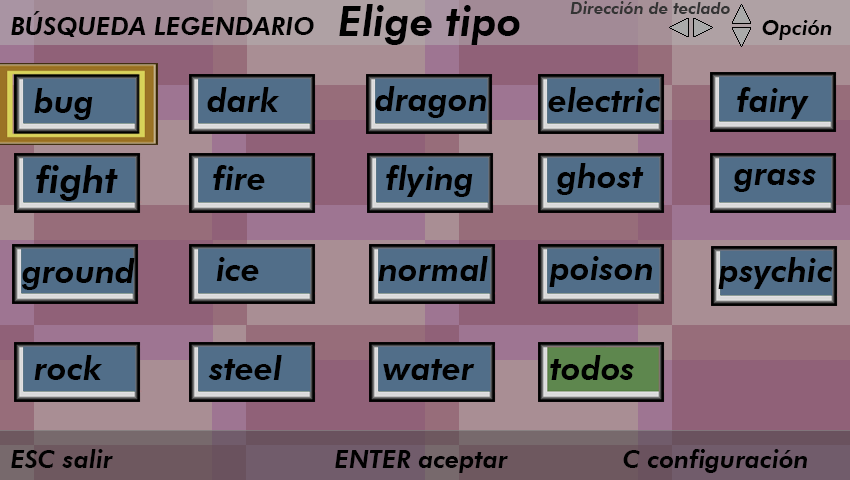
<style>
.page{position:relative;width:850px;height:480px}
.page>*{position:absolute;margin:0}
.t1{font:41.7px "FuturaBT-HeavyItalic";color:#000000}
.t2{font:16.7px "FuturaBT-HeavyItalic";color:#343434}
.t3{font:25px "FuturaBT-HeavyItalic";color:#000000}
.t4{font:20.8px "FuturaBT-HeavyItalic";color:#000000}
.t5{font:33.3px "FuturaBT-HeavyItalic";color:#000000}
.t6{font:37.5px "FuturaBT-HeavyItalic";color:#000000}
</style>
<div class="page">
<p class="t1" style="left:339px;top:4px;width:181px;height:41px">Elige tipo</p>
<p class="t2" style="left:570px;top:1px;width:160px;height:13px">Dirección de teclado</p>
<p class="t3" style="left:11px;top:11px;width:303px;height:26px">BÚSQUEDA LEGENDARIO</p>
<p class="t4" style="left:762px;top:20px;width:70px;height:20px">Opción</p>
<p class="t5" style="left:34px;top:88px;width:59px;height:32px">bug</p>
<p class="t5" style="left:207px;top:87px;width:73px;height:25px">dark</p>
<p class="t5" style="left:375px;top:86px;width:111px;height:32px">dragon</p>
<p class="t5" style="left:548px;top:87px;width:113px;height:25px">electric</p>
<p class="t5" style="left:737px;top:87px;width:72px;height:32px">fairy</p>
<p class="t6" style="left:36px;top:165px;width:82px;height:36px">fight</p>
<p class="t5" style="left:213px;top:165px;width:52px;height:25px">fire</p>
<p class="t5" style="left:386px;top:165px;width:87px;height:32px">flying</p>
<p class="t5" style="left:556px;top:163px;width:88px;height:32px">ghost</p>
<p class="t5" style="left:733px;top:169px;width:83px;height:23px">grass</p>
<p class="t5" style="left:216px;top:257px;width:43px;height:24px">ice</p>
<p class="t5" style="left:378px;top:256px;width:110px;height:25px">normal</p>
<p class="t5" style="left:549px;top:256px;width:103px;height:31px">poison</p>
<p class="t5" style="left:718px;top:257px;width:115px;height:32px">psychic</p>
<p class="t5" style="left:21px;top:258px;width:114px;height:32px">ground</p>
<p class="t5" style="left:34px;top:355px;width:68px;height:25px">rock</p>
<p class="t5" style="left:208px;top:355px;width:74px;height:25px">steel</p>
<p class="t5" style="left:383px;top:359px;width:92px;height:21px">water</p>
<p class="t5" style="left:550px;top:355px;width:84px;height:25px">todos</p>
<p class="t3" style="left:11px;top:449px;width:796px;height:24px">ESC salir         ENTER aceptar      C configuración</p>
</div>
